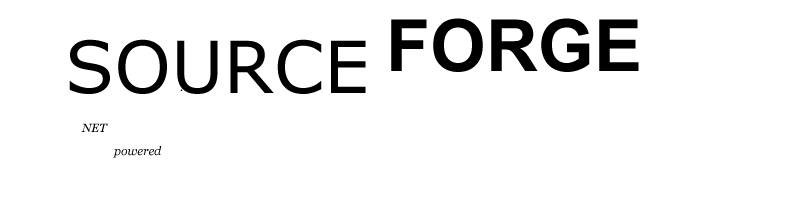
<style>
.page{position:relative;width:800px;height:200px;background:#ffffff}
.page>*{position:absolute;margin:0}
.t1{font:72px "Arial-BoldMT";color:#000000}
.t2{font:72px "MSReferenceSansSerif";color:#000000}
.t3{font:12px "Georgia-Italic";color:#000000}
</style>
<div class="page">
<p class="t1" style="left:391px;top:18px;width:248px;height:54px">FORGE</p>
<p class="t2" style="left:69px;top:39px;width:297px;height:55px">SOURCE</p>
<p class="t3" style="left:180px;top:89px;width:3px;height:2px">.</p>
<p class="t3" style="left:81px;top:123px;width:27px;height:9px">NET</p>
<p class="t3" style="left:113px;top:146px;width:49px;height:12px">powered</p>
</div>
